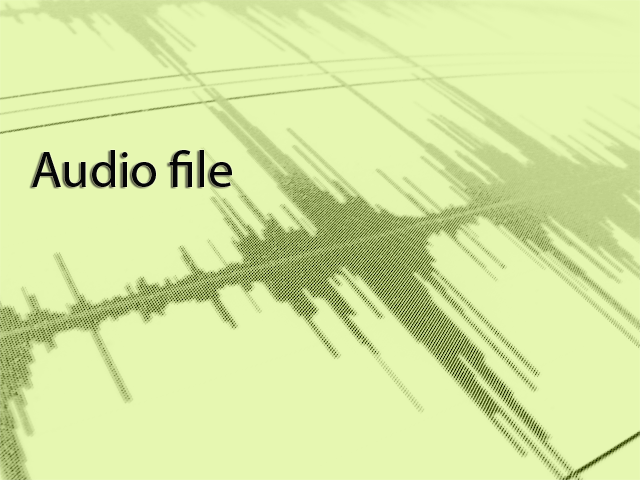
<style>
.page{position:relative;width:640px;height:480px;background:#e6f7b1}
.page>*{position:absolute;margin:0}
.t1{font:51.2px "MyriadPro-Regular";color:#040506}
</style>
<div class="page">
<p class="t1" style="left:32px;top:150px;width:200px;height:37px">Audio file</p>
</div>
